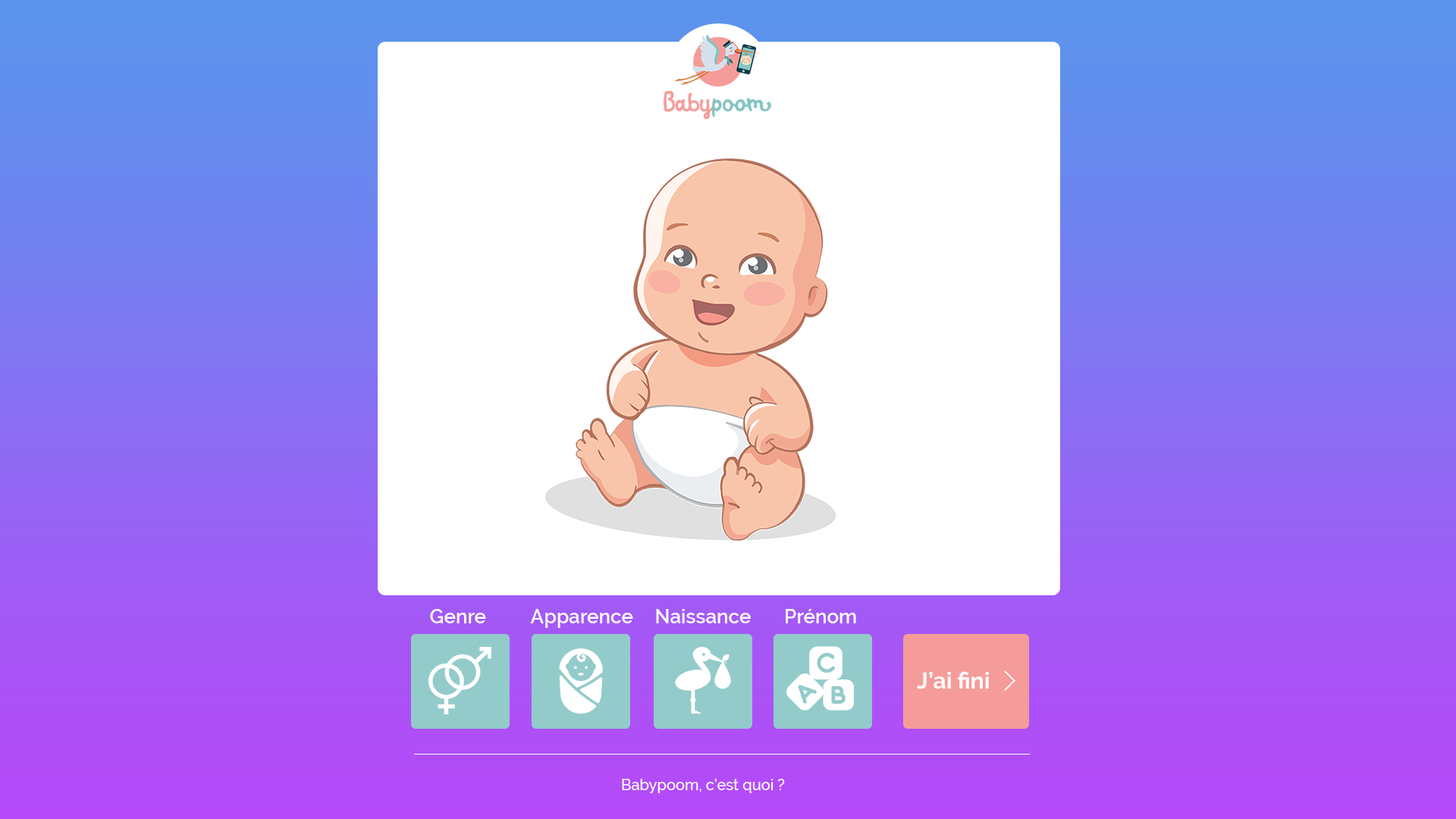
<style>
.page{position:relative;width:1456px;height:819px;background:#ffffff}
.page>*{position:absolute;margin:0}
.t1{font:19.7px "Raleway-SemiBold";color:#fffafa}
.t2{font:22.7px "Raleway-Bold";color:#fffafa}
.t3{font:15.2px "Raleway-Medium";color:#ffffff}
</style>
<div class="page">
<p class="t1" style="left:430px;top:609px;width:56px;height:14px">Genre</p>
<p class="t1" style="left:530px;top:609px;width:103px;height:19px">Apparence</p>
<p class="t1" style="left:656px;top:609px;width:95px;height:14px">Naissance</p>
<p class="t1" style="left:786px;top:609px;width:70px;height:14px">Prénom</p>
<p class="t2" style="left:917px;top:671px;width:72px;height:18px">J’ai fini</p>
<p class="t3" style="left:622px;top:779px;width:163px;height:14px">Babypoom, c’est quoi ?</p>
</div>
